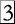
<style>
.page{position:relative;width:15px;height:24px;background:#ffffff}
.page>*{position:absolute;margin:0}
.t1{font:24px "Garamond";color:#000000}
</style>
<div class="page">
<p class="t1" style="left:3px;top:4px;width:10px;height:17px">3</p>
</div>
